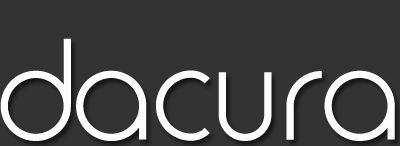
<style>
.page{position:relative;width:400px;height:146px;background:#333333}
.page>*{position:absolute;margin:0}
.t1{font:134px "TimeBurner";color:#ffffff}
</style>
<div class="page">
<p class="t1" style="left:0px;top:38px;width:395px;height:103px">dacura</p>
</div>
